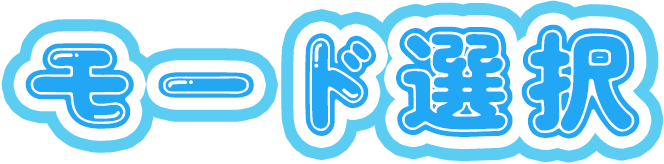
<style>
.page{position:relative;width:664px;height:164px;background:#ffffff}
.page>*{position:absolute;margin:0}
.t1{font:125px "DokiDokiFantasia";color:#21a7f4}
</style>
<div class="page">
<p class="t1" style="left:25px;top:24px;width:615px;height:115px">モード選択</p>
</div>
